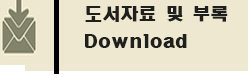
<style>
.page{position:relative;width:248px;height:78px;background:#eee8d0}
.page>*{position:absolute;margin:0}
.t1{font:16.8px "HeadlineR-HM";color:#1f1f1d;scale:1.07 1}
</style>
<div class="page">
<p class="t1" style="left:85px;top:6px;width:143px;height:16px">도서자료 및 부록</p>
<p class="t1" style="left:85px;top:34px;width:102px;height:14px">Download</p>
</div>
